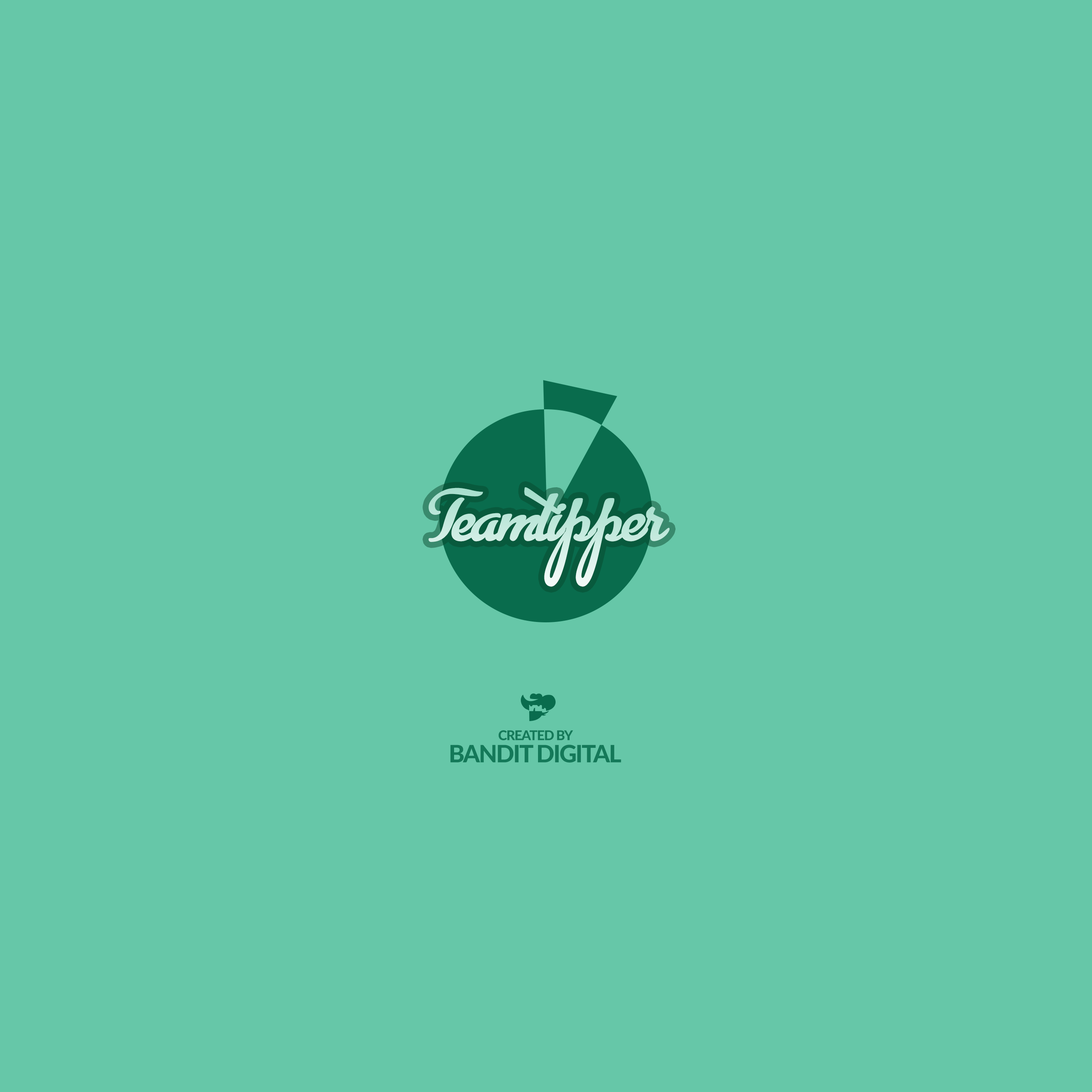
<style>
.page{position:relative;width:1092px;height:1092px;background:#66c7a8}
.page>*{position:absolute;margin:0}
.t1{font:60px "AdvertisingScript-Bold";letter-spacing:-0.05em;color:#c2e9dc}
.t2{font:13.5px "Lato-Heavy";letter-spacing:-0.05em;color:#147959}
.t3{font:24px "Lato-Heavy";letter-spacing:-0.05em;color:#147959}
</style>
<div class="page">
<p class="t1" style="left:428px;top:487px;width:242px;height:100px">TeamTipper</p>
<p class="t2" style="left:498px;top:730px;width:75px;height:10px">CREATED BY</p>
<p class="t3" style="left:450px;top:745px;width:171px;height:18px">BANDIT DIGITAL</p>
</div>
